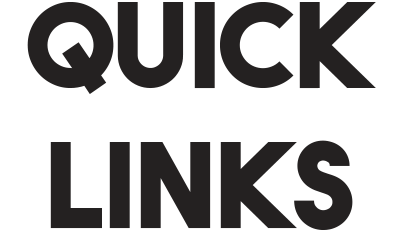
<style>
.page{position:relative;width:400px;height:250px;background:#ffffff}
.page>*{position:absolute;margin:0}
.t1{font:116.7px "TheBoldFont";color:#242121}
</style>
<div class="page">
<p class="t1" style="left:27px;top:2px;width:349px;height:228px;text-align:center">quick <br>lINKS</p>
</div>
